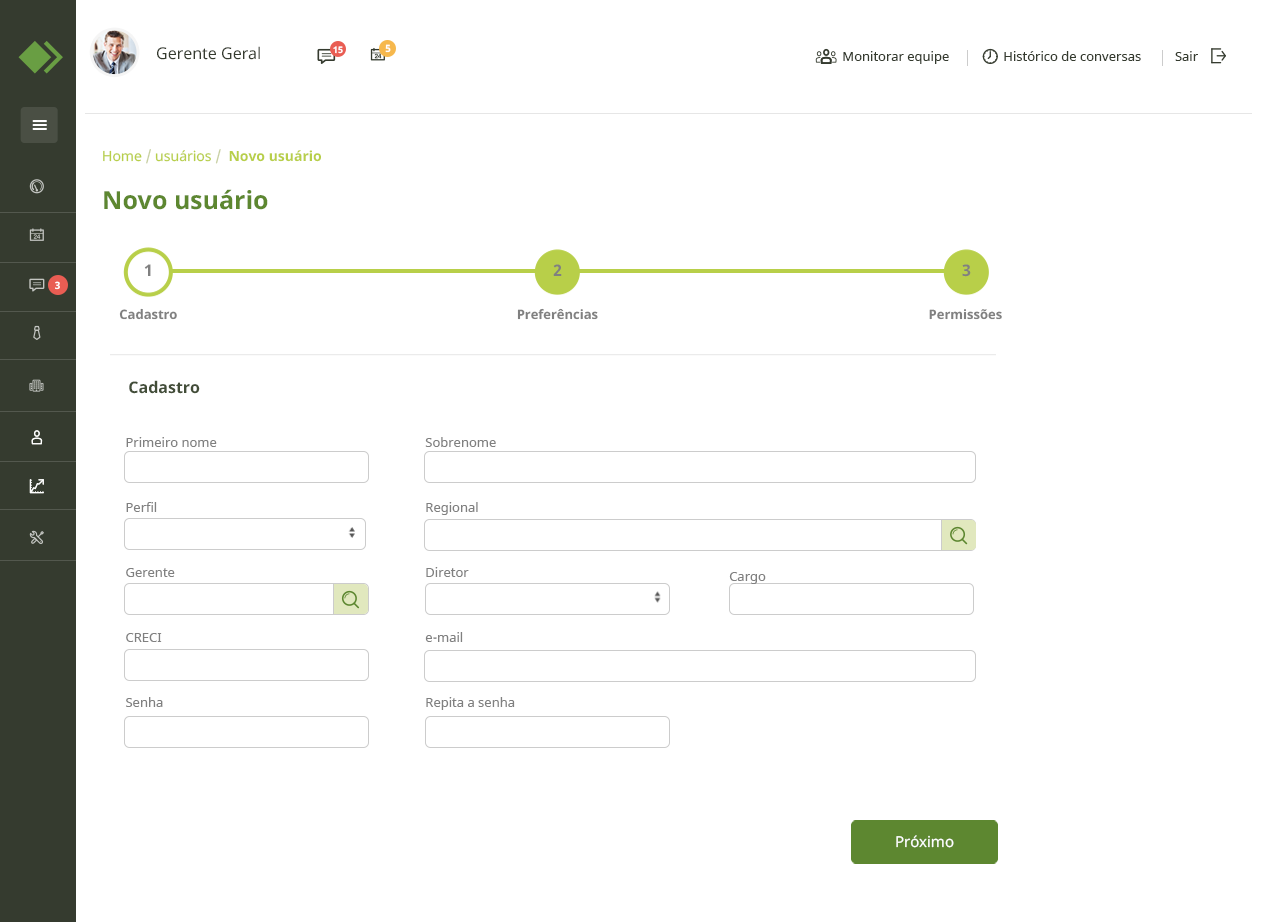
<style>
.page{position:relative;width:1280px;height:922px;background:#ffffff}
.page>*{position:absolute;margin:0}
.t1{font:16px "NotoSans";color:#353b2f}
.t2{font:9px "NotoSans-Bold";color:#ffffff}
.t3{font:10px "NotoSans-Bold";color:#ffffff}
.t4{font:13px "NotoSans";color:#353b2f}
.t5{font:14px "NotoSans-Bold";color:#b8cf49}
.t6{font:14px "NotoSans";color:#b8cf49}
.t7{font:14px "NotoSans";color:#c7cfa1}
.t8{font:25px "NotoSans-Bold";color:#5d8730}
.t9{font:16px "NotoSans-Bold";color:#808080}
.t10{font:13px "NotoSans-Bold";color:#808080}
.t11{font:16px "NotoSans-Bold";color:#424d38}
.t12{font:13px/65px "NotoSans";color:#808080}
.t13{font:13px "NotoSans";color:#808080}
.t14{font:15px "NotoSans";color:#ffffff}
</style>
<div class="page">
<p class="t1" style="left:157px;top:46px;width:103px;height:14px">Gerente Geral</p>
<p class="t2" style="left:333px;top:46px;width:10px;height:8px">15</p>
<p class="t3" style="left:385px;top:44px;width:6px;height:9px">5</p>
<p class="t4" style="left:843px;top:51px;width:355px;height:13px">Monitorar equipe                Histórico de conversas          Sair</p>
<p class="t5" style="left:103px;top:149px;width:218px;height:15px"><span class="t6">Home </span><span class="t7">/</span><span class="t6"> usuários </span><span class="t7">/  </span>Novo usuário</p>
<p class="t8" style="left:104px;top:189px;width:164px;height:21px">Novo usuário</p>
<p class="t9" style="left:144px;top:264px;width:7px;height:12px">1</p>
<p class="t9" style="left:553px;top:264px;width:9px;height:12px">2</p>
<p class="t9" style="left:962px;top:264px;width:9px;height:13px">3</p>
<p class="t3" style="left:55px;top:281px;width:5px;height:9px">3</p>
<p class="t10" style="left:119px;top:308px;width:58px;height:12px">Cadastro</p>
<p class="t10" style="left:517px;top:308px;width:81px;height:12px">Preferências</p>
<p class="t10" style="left:929px;top:309px;width:73px;height:11px">Permissões</p>
<p class="t11" style="left:129px;top:380px;width:71px;height:14px">Cadastro</p>
<p class="t12" style="left:126px;top:437px;width:91px;height:270px">Primeiro nome<br>Perfil<br>Gerente<br>CRECI<br>Senha</p>
<p class="t12" style="left:425px;top:437px;width:90px;height:273px">Sobrenome<br>Regional<br>Diretor<br>e-mail<br>Repita a senha</p>
<p class="t13" style="left:729px;top:572px;width:37px;height:12px">Cargo</p>
<p class="t14" style="left:896px;top:835px;width:58px;height:13px">Próximo</p>
</div>
